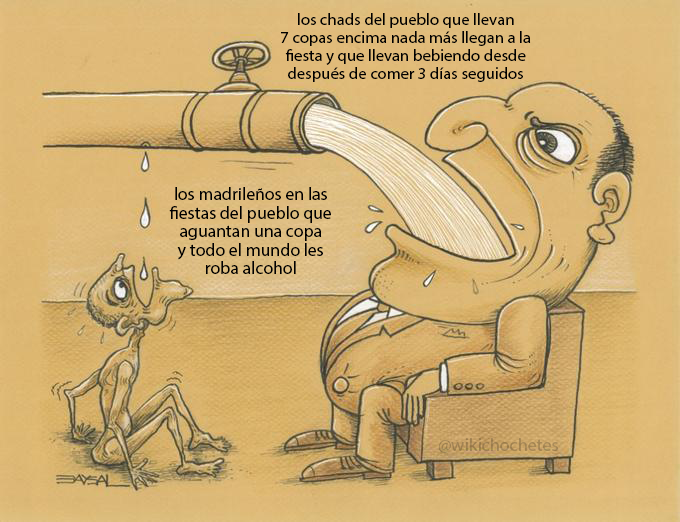
<style>
.page{position:relative;width:680px;height:522px}
.page>*{position:absolute;margin:0}
.t1{font:16.7px "MyriadPro-Regular";color:#000000}
.t2{font:17.1px "MyriadPro-Regular";color:#000000;scale:1.04 1}
.t3{font:18px "MyriadPro-Regular";color:#a18352}
</style>
<div class="page">
<p class="t1" style="left:281px;top:13px;width:250px;height:69px;text-align:center">los chads del pueblo que llevan<br>7 copas encima nada más llegan a la<br>fiesta y que llevan bebiendo desde<br>después de comer 3 días seguidos</p>
<p class="t2" style="left:169px;top:187px;width:162px;height:87px;text-align:center">los madrileños en las<br>fiestas del pueblo que<br>aguantan una copa<br>y todo el mundo les<br>roba alcohol</p>
<p class="t3" style="left:438px;top:438px;width:120px;height:15px">@wikichochetes</p>
</div>
